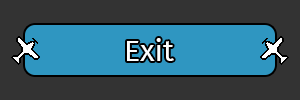
<style>
.page{position:relative;width:300px;height:100px;background:#333333}
.page>*{position:absolute;margin:0}
.t1{font:30px "FiraSans-Regular";color:#ffffff}
</style>
<div class="page">
<p class="t1" style="left:127px;top:38px;width:47px;height:23px">Exit</p>
</div>
